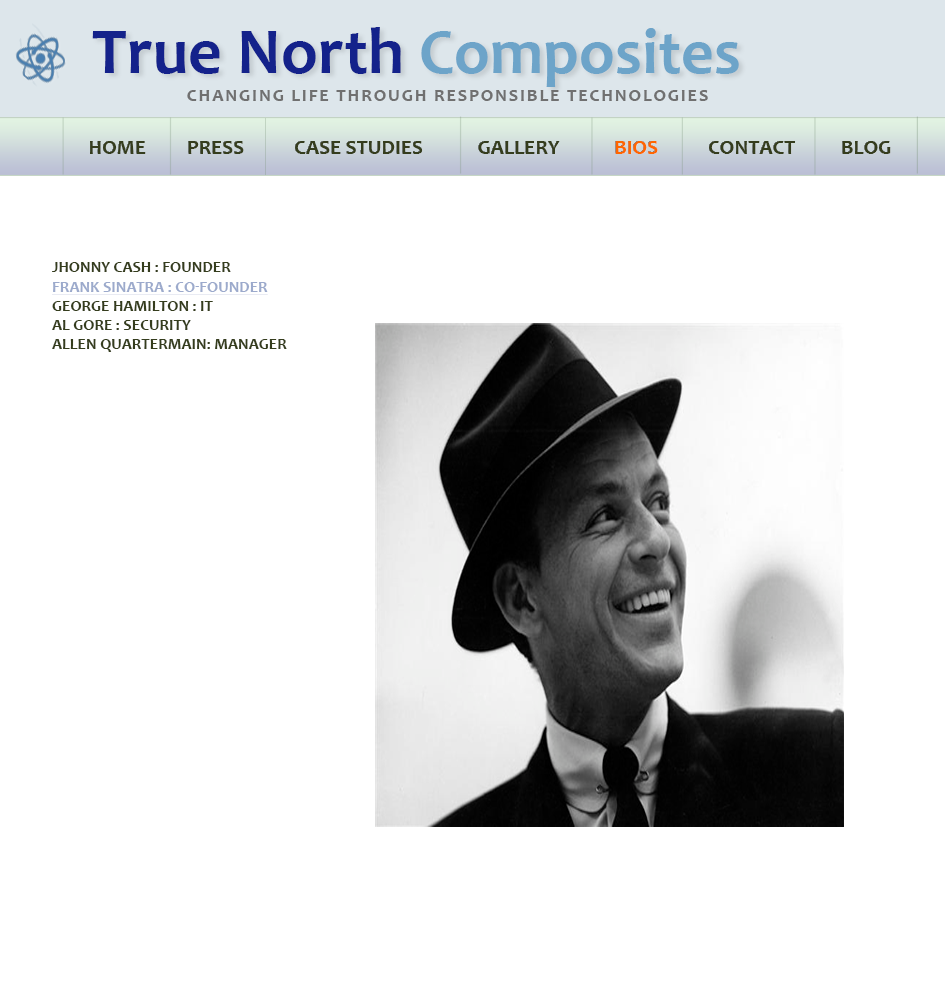
<style>
.page{position:relative;width:945px;height:1000px;background:#ffffff}
.page>*{position:absolute;margin:0}
.t1{font:66.4px "Candara-Bold";color:#14228b}
.t2{font:64.2px "Candara-Bold";color:#6da4c9}
.t3{font:18px "Candara-Bold";letter-spacing:0.1em;color:#707070;text-transform:uppercase}
.t4{font:21px "Candara-Bold";color:#353d1d;text-transform:uppercase}
.t5{font:21px "Candara-Bold";color:#ff6600;text-transform:uppercase}
.t6{font:16px "Candara-Bold";color:#353d1d;text-transform:uppercase}
.t7{font:16px "Candara-Bold";color:#9caacc;text-transform:uppercase;text-decoration:underline}
</style>
<div class="page">
<p class="t1" style="left:92px;top:27px;width:647px;height:60px">True North <span class="t2">Composites</span></p>
<p class="t3" style="left:187px;top:90px;width:521px;height:11px">Changing life through responsible technologies</p>
<p class="t4" style="left:90px;top:141px;width:801px;height:13px">Home         Press           Case Studies            Gallery           <span class="t5"> Bios</span>           Contact          Blog</p>
<p class="t6" style="left:52px;top:262px;width:235px;height:90px">Jhonny Cash : Founder<br><span class="t7">Frank Sinatra : Co-Founder<br></span>George Hamilton : IT<br>Al Gore : Security<br>Allen quartermain: manager</p>
</div>
